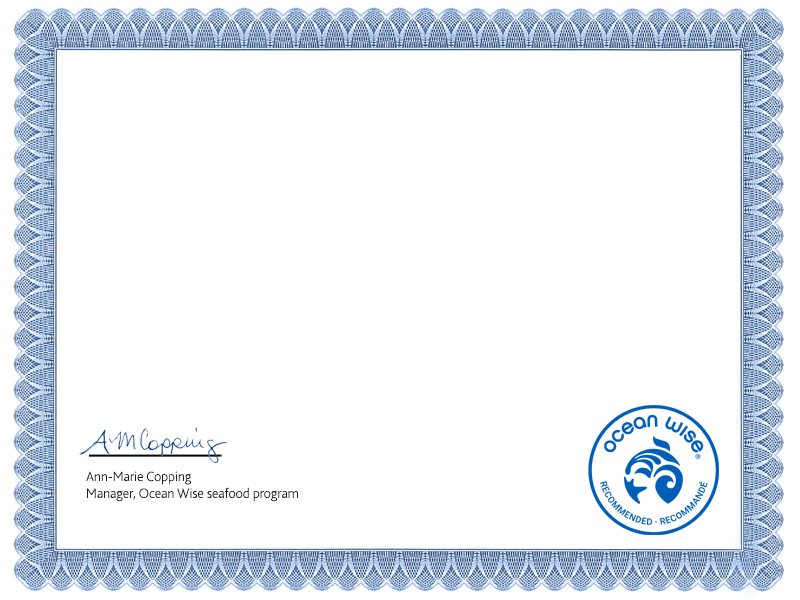
<style>
.page{position:relative;width:800px;height:600px;background:#ffffff}
.page>*{position:absolute;margin:0}
.t1{font:14px "Bliss2-ExtraLight";color:#1d1c1a}
</style>
<div class="page">
<p class="t1" style="left:86px;top:471px;width:212px;height:31px">Ann-Marie Copping<br>Manager, Ocean Wise seafood program</p>
</div>
